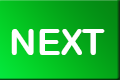
<style>
.page{position:relative;width:120px;height:80px}
.page>*{position:absolute;margin:0}
.t1{font:36px "ArialRoundedMTBold";color:#ffffff}
</style>
<div class="page">
<p class="t1" style="left:11px;top:29px;width:94px;height:26px">NEXT</p>
</div>
